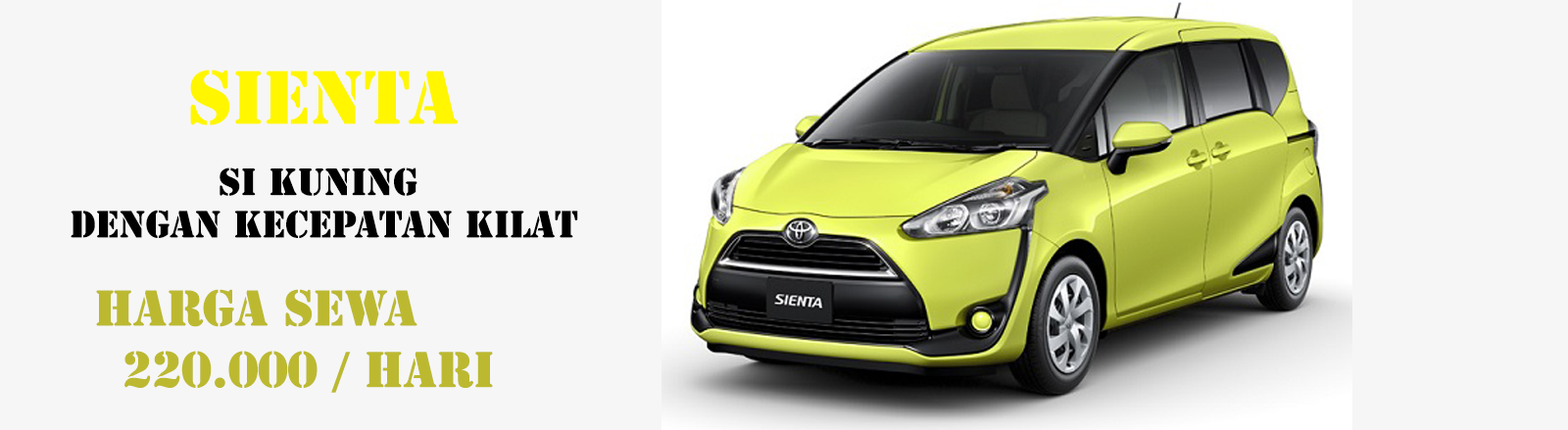
<style>
.page{position:relative;width:1568px;height:430px;background:#f6f6f6}
.page>*{position:absolute;margin:0}
.t1{font:70.6px "StencilStd";color:#fff600}
.t2{font:35.3px "StencilStd";color:#000000}
.t3{font:47px "StencilStd";color:#bcb931}
</style>
<div class="page">
<p class="t1" style="left:190px;top:70px;width:269px;height:55px">SIENTA</p>
<p class="t2" style="left:71px;top:168px;width:507px;height:70px;text-align:center">si kuning <br>dengan kecepatan kilat</p>
<p class="t3" style="left:96px;top:289px;width:321px;height:38px">HARGA SEWA</p>
<p class="t3" style="left:124px;top:351px;width:369px;height:42px">220.000 / hari</p>
</div>
